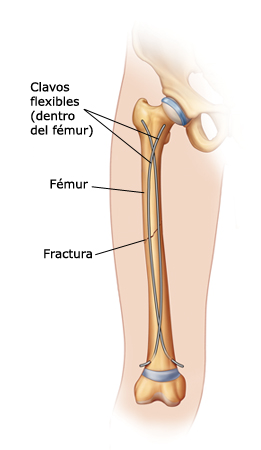
<style>
.page{position:relative;width:261px;height:450px;background:#ffffff}
.page>*{position:absolute;margin:0}
.t1{font:12px "MSReferenceSansSerif";color:#000000}
</style>
<div class="page">
<p class="t1" style="left:30px;top:82px;width:63px;height:55px">Clavos<br>flexibles<br>(dentro<br>del fémur)</p>
<p class="t1" style="left:50px;top:178px;width:38px;height:11px">Fémur</p>
<p class="t1" style="left:44px;top:249px;width:48px;height:10px">Fractura</p>
</div>
